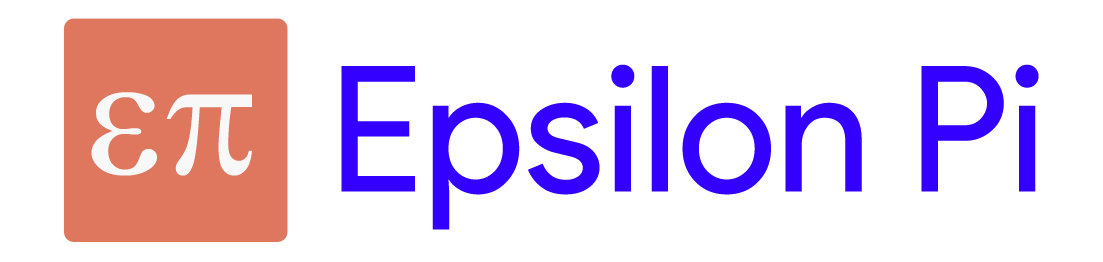
<style>
.page{position:relative;width:1103px;height:262px;background:#ffffff}
.page>*{position:absolute;margin:0}
.t1{font:175px "ProductSans-Regular";color:#3300ff}
</style>
<div class="page">
<p class="t1" style="left:341px;top:64px;width:698px;height:166px">Epsilon Pi</p>
</div>
